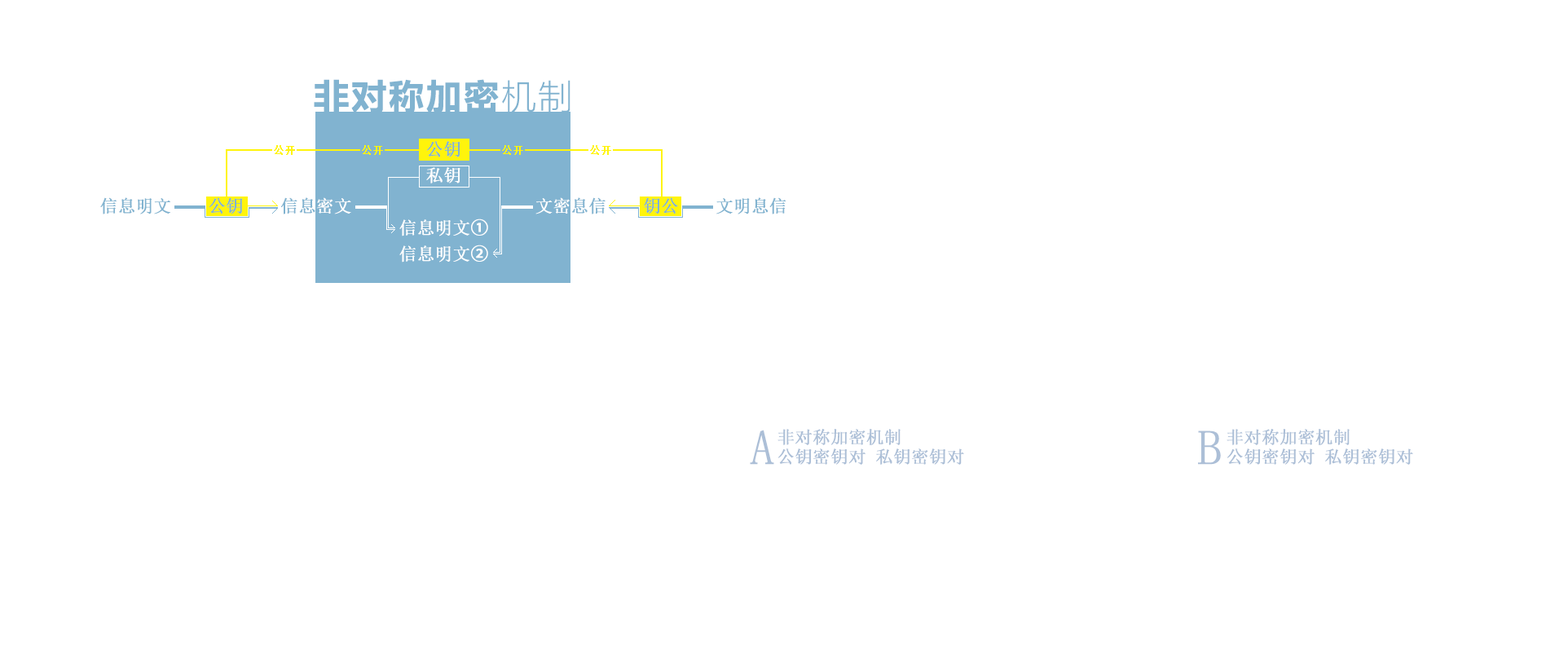
<style>
.page{position:relative;width:1568px;height:658px;background:#ffffff}
.page>*{position:absolute;margin:0}
.t1{font:34.8px "MicrosoftYaHei-Bold";letter-spacing:0.05em;color:#81b3d0;font-weight:bold}
.t2{font:34.8px "MicrosoftYaHeiLight";letter-spacing:0.05em;color:#81b3d0}
.t3{font:10.9px "SimSun";color:#fff40b;font-weight:bold}
.t4{font:17.4px/26.1px "SimSun";color:#ffffff;font-weight:bold}
.t5{font:17.4px/26.1px "SimSun";color:#81b3d0;font-weight:bold}
.t6{font:17.4px/26.1px "AdobeHeitiStd-Regular";color:#ffffff;font-weight:bold}
.t7{font:49.1px "SimSun";color:#acbfd7;font-weight:bold}
.t8{font:17.4px/19.6px "SimSun";color:#acbfd7;font-weight:bold}
</style>
<div class="page">
<p class="t1" style="left:314px;top:79px;width:256px;height:35px">非对称加密<span class="t2">机制</span></p>
<p class="t3" style="left:274px;top:145px;width:337px;height:10px">公开          公开                  公开          公开</p>
<p class="t4" style="left:399px;top:141px;width:89px;height:121px;text-align:center"><span class="t5">公钥<br></span>私钥<br><br>信息明文<span class="t6">①<br></span>信息明文<span class="t6">②</span></p>
<p class="t7" style="left:750px;top:429px;width:24px;height:36px">A</p>
<p class="t8" style="left:777px;top:429px;width:187px;height:36px">非对称加密机制<br>公钥密钥对 私钥密钥对</p>
<p class="t7" style="left:1198px;top:430px;width:23px;height:35px">B</p>
<p class="t8" style="left:1227px;top:429px;width:186px;height:36px">非对称加密机制<br>公钥密钥对 私钥密钥对</p>
</div>
